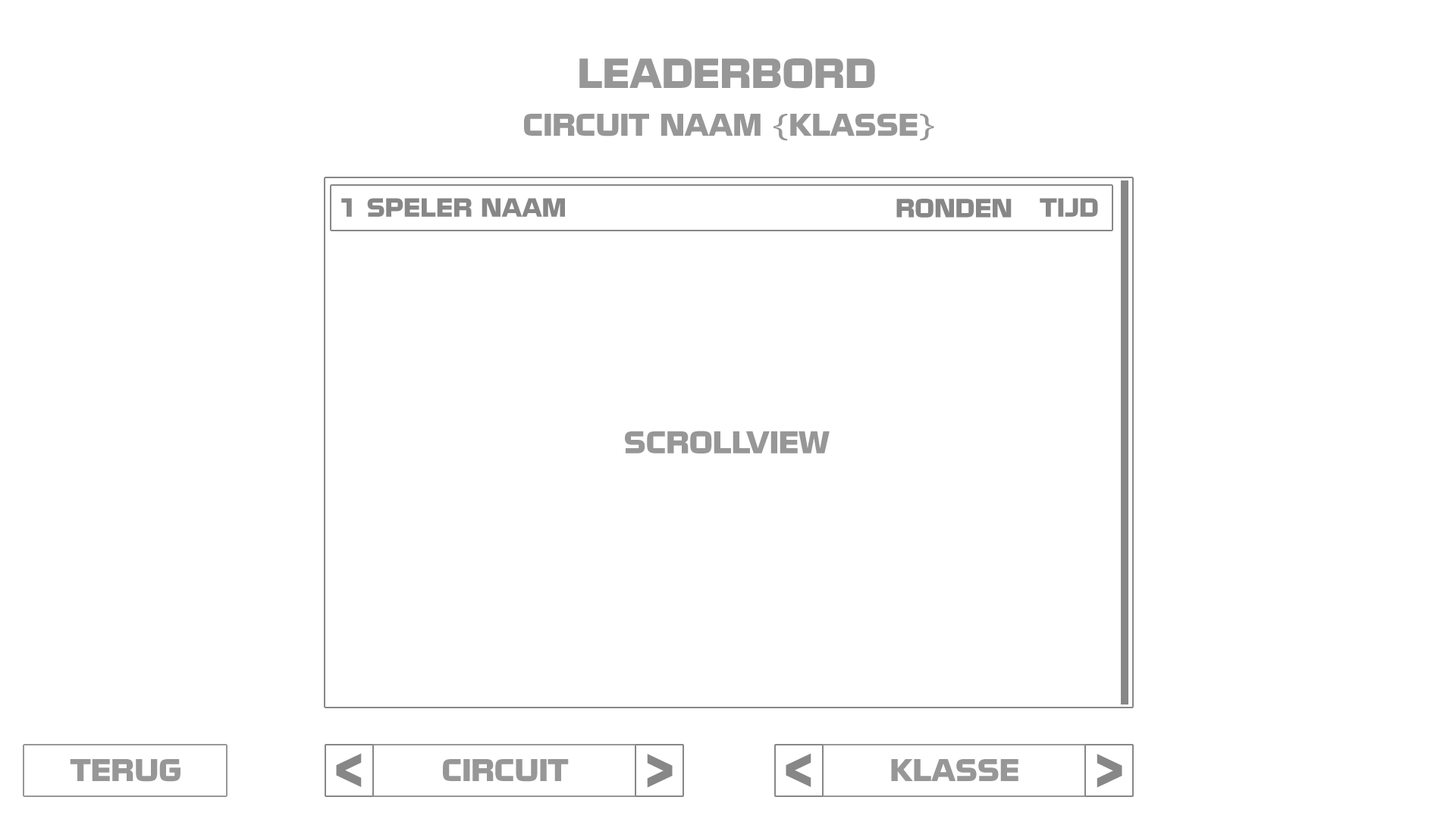
<style>
.page{position:relative;width:1456px;height:819px;background:#ffffff}
.page>*{position:absolute;margin:0}
.t1{font:36.4px "NissanOpti";color:#979797}
.t2{font:27.3px "NissanOpti";color:#979797}
.t3{font:22.7px "NissanOpti";color:#878787}
.t4{font:45.5px "NissanOpti";color:#878787}
</style>
<div class="page">
<p class="t1" style="left:579px;top:58px;width:296px;height:31px">LEADERBORD</p>
<p class="t2" style="left:524px;top:114px;width:410px;height:27px">CIRCUIT NAAM {KLASSE}</p>
<p class="t3" style="left:341px;top:198px;width:11px;height:19px">1</p>
<p class="t3" style="left:367px;top:198px;width:198px;height:19px">SPELER NAAM</p>
<p class="t3" style="left:1040px;top:198px;width:58px;height:19px">TIJD</p>
<p class="t3" style="left:896px;top:199px;width:116px;height:19px">RONDEN</p>
<p class="t2" style="left:625px;top:431px;width:205px;height:22px">SCROLLVIEW</p>
<p class="t2" style="left:70px;top:759px;width:110px;height:23px">TERUG</p>
<p class="t4" style="left:336px;top:753px;width:26px;height:34px;rotate:180deg">&gt;</p>
<p class="t2" style="left:443px;top:759px;width:126px;height:23px">CIRCUIT</p>
<p class="t4" style="left:647px;top:754px;width:26px;height:34px">&gt;</p>
<p class="t4" style="left:786px;top:753px;width:25px;height:34px;rotate:180deg">&gt;</p>
<p class="t2" style="left:891px;top:759px;width:127px;height:22px">KLASSE</p>
<p class="t4" style="left:1097px;top:754px;width:25px;height:34px">&gt;</p>
</div>
